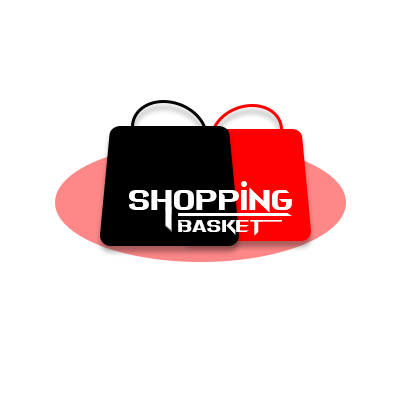
<style>
.page{position:relative;width:400px;height:400px;background:#ffffff}
.page>*{position:absolute;margin:0}
.t1{font:28.7px "AGrazingMace";color:#ffffff}
.t2{font:18.2px "AGrazingMace";color:#ffffff;scale:1.05 1}
</style>
<div class="page">
<p class="t1" style="left:129px;top:187px;width:163px;height:28px">shopping</p>
<p class="t2" style="left:178px;top:220px;width:85px;height:16px">Basket</p>
</div>
